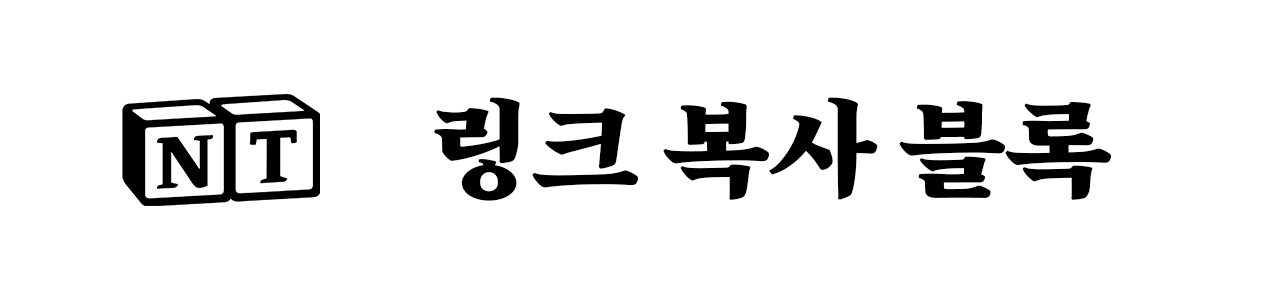
<style>
.page{position:relative;width:1280px;height:300px;background:#ffffff}
.page>*{position:absolute;margin:0}
.t1{font:109.1px "RixDongnimMyeongjoR";color:#000000}
</style>
<div class="page">
<p class="t1" style="left:434px;top:97px;width:678px;height:104px">링크 복사 블록</p>
</div>
